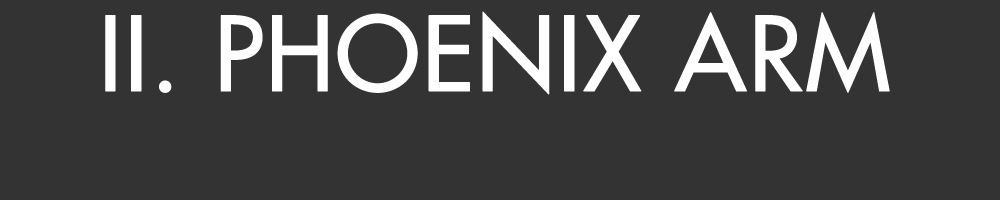
<style>
.page{position:relative;width:1000px;height:200px;background:#333333}
.page>*{position:absolute;margin:0}
.t1{font:100px "Futura";color:#ffffff;font-weight:bold}
</style>
<div class="page">
<p class="t1" style="left:105px;top:11px;width:785px;height:84px">II. PHOENIX ARM</p>
</div>
